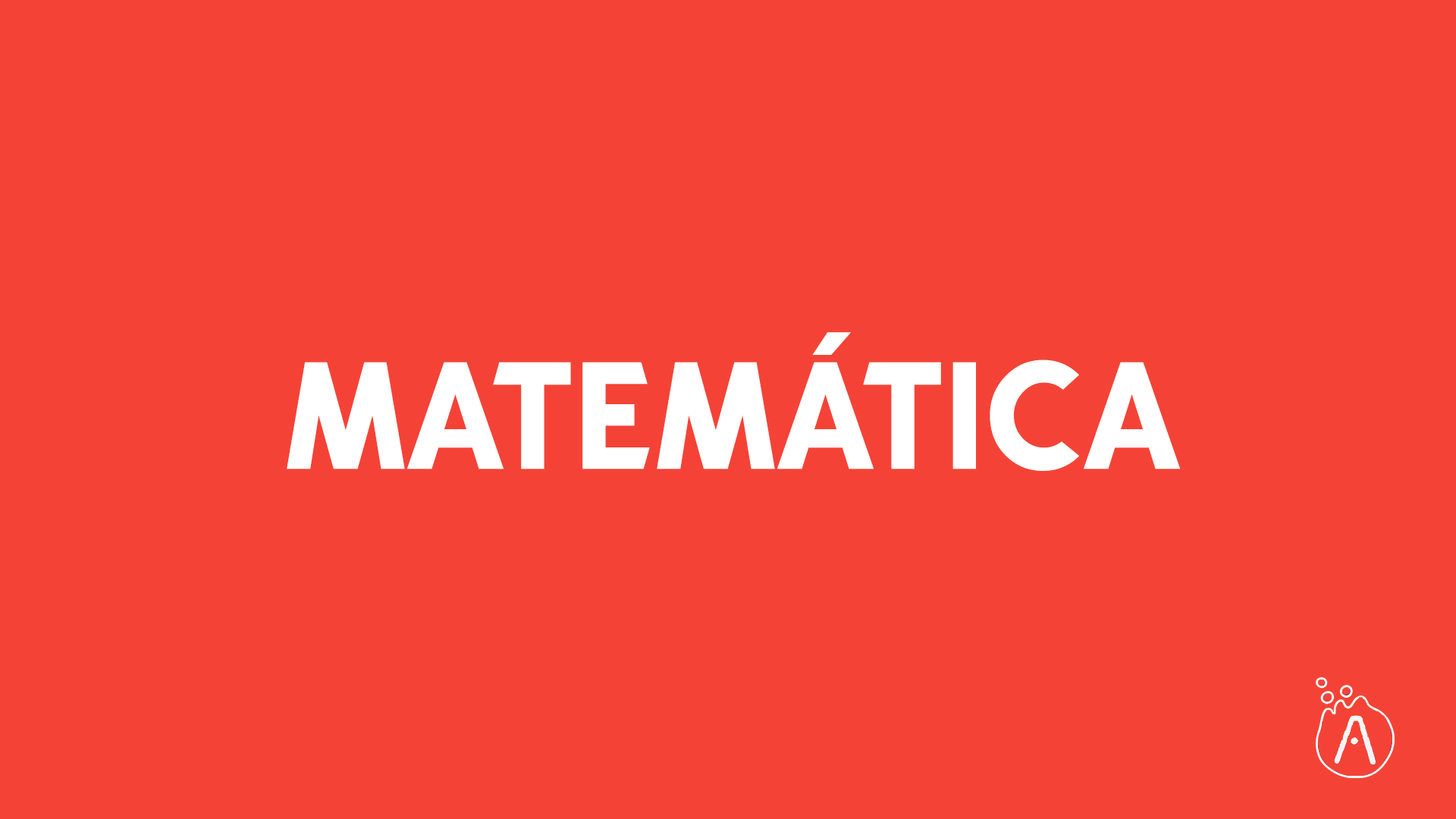
<style>
.page{position:relative;width:1456px;height:819px;background:#f44336}
.page>*{position:absolute;margin:0}
.t1{font:151.7px "TheSimsSans-Bold";color:#ffffff}
</style>
<div class="page">
<p class="t1" style="left:287px;top:332px;width:893px;height:139px">MATEMÁTICA</p>
</div>
